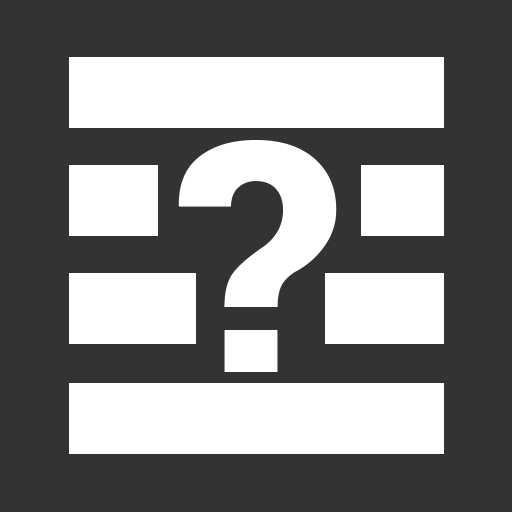
<style>
.page{position:relative;width:512px;height:512px;background:#333333}
.page>*{position:absolute;margin:0}
.t1{font:322px "Roboto-Black";color:#ffffff}
</style>
<div class="page">
<p class="t1" style="left:178px;top:140px;width:159px;height:232px">?</p>
</div>
